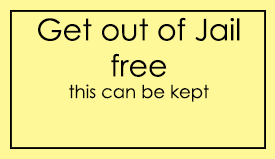
<style>
.page{position:relative;width:275px;height:159px;background:#fff899}
.page>*{position:absolute;margin:0}
.t1{font:30px "CenturyGothic";color:#000000}
.t2{font:18px "CenturyGothic";color:#000000}
</style>
<div class="page">
<p class="t1" style="left:38px;top:17px;width:202px;height:85px;text-align:center">Get out of Jail free<span class="t2"><br>this can be kept</span></p>
</div>
